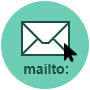
<style>
.page{position:relative;width:90px;height:90px;background:#6dceb5}
.page>*{position:absolute;margin:0}
.t1{font:14px "Arial-BoldMT";color:#1f5144}
</style>
<div class="page">
<p class="t1" style="left:24px;top:64px;width:45px;height:10px">mailto:</p>
</div>
